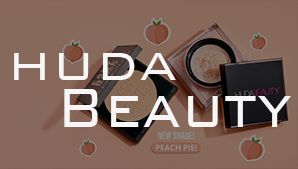
<style>
.page{position:relative;width:298px;height:169px}
.page>*{position:absolute;margin:0}
.t1{font:52.9px "BankGothicBT-Light";letter-spacing:0.01em;color:#f6f6f6}
.t2{font:74.1px "BankGothicBT-Light";letter-spacing:0.01em;color:#f6f6f6;scale:0.85 1}
</style>
<div class="page">
<p class="t1" style="left:14px;top:53px;width:162px;height:27px">HUDA</p>
<p class="t2" style="left:64px;top:89px;width:227px;height:38px">Beauty</p>
</div>
